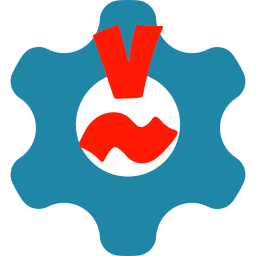
<style>
.page{position:relative;width:256px;height:256px;background:#ffffff}
.page>*{position:absolute;margin:0}
.t1{font:93.5px "Coopers-Town";color:#ff1b03}
.t2{font:161.6px "Coopers-Town";color:#ff1b03}
</style>
<div class="page">
<p class="t1" style="left:93px;top:24px;width:70px;height:75px">V</p>
<p class="t2" style="left:78px;top:112px;width:100px;height:52px">~</p>
</div>
